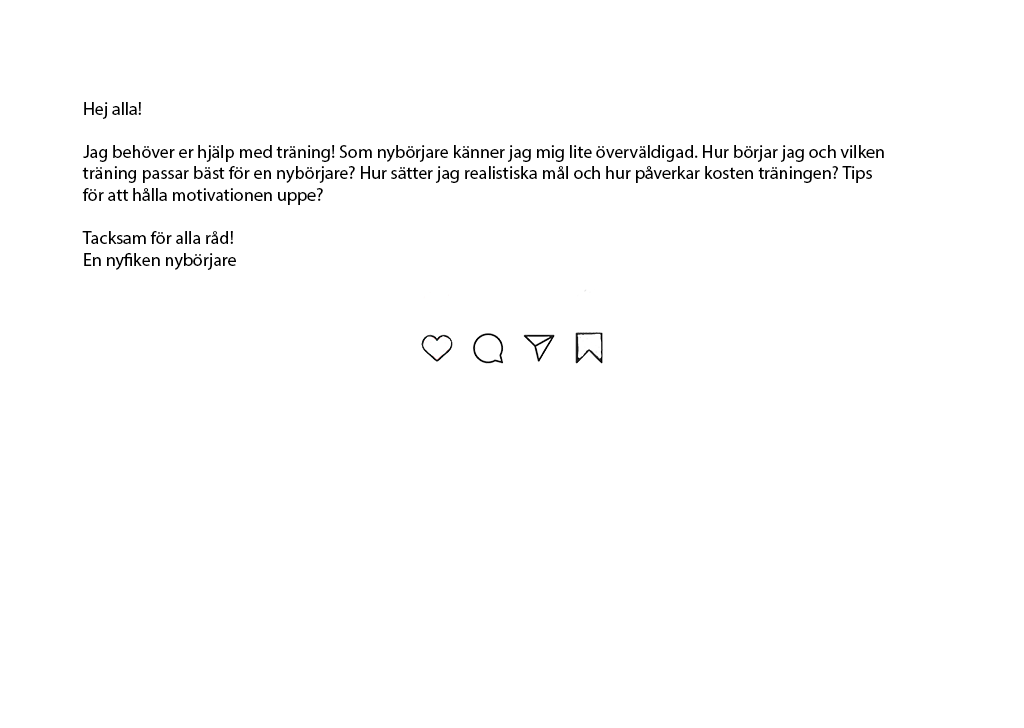
<style>
.page{position:relative;width:1024px;height:728px;background:#ffffff}
.page>*{position:absolute;margin:0}
.t1{font:18px "MyriadPro-Regular";color:#000000}
</style>
<div class="page">
<p class="t1" style="left:82px;top:102px;width:802px;height:168px">Hej alla!<br><br>Jag behöver er hjälp med träning! Som nybörjare känner jag mig lite överväldigad. Hur börjar jag och vilken träning passar bäst för en nybörjare? Hur sätter jag realistiska mål och hur påverkar kosten träningen? Tips för att hålla motivationen uppe?<br><br>Tacksam för alla råd!<br>En nyfiken nybörjare</p>
</div>
